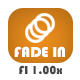
<style>
.page{position:relative;width:80px;height:80px;background:#ffffff}
.page>*{position:absolute;margin:0}
.t1{font:15px "Bauhaus93";color:#ffffff}
.t2{font:12px "Bauhaus93";color:#464646}
</style>
<div class="page">
<p class="t1" style="left:14px;top:46px;width:51px;height:11px">FADE IN</p>
<p class="t2" style="left:19px;top:65px;width:43px;height:10px">FI 1.00x</p>
</div>
